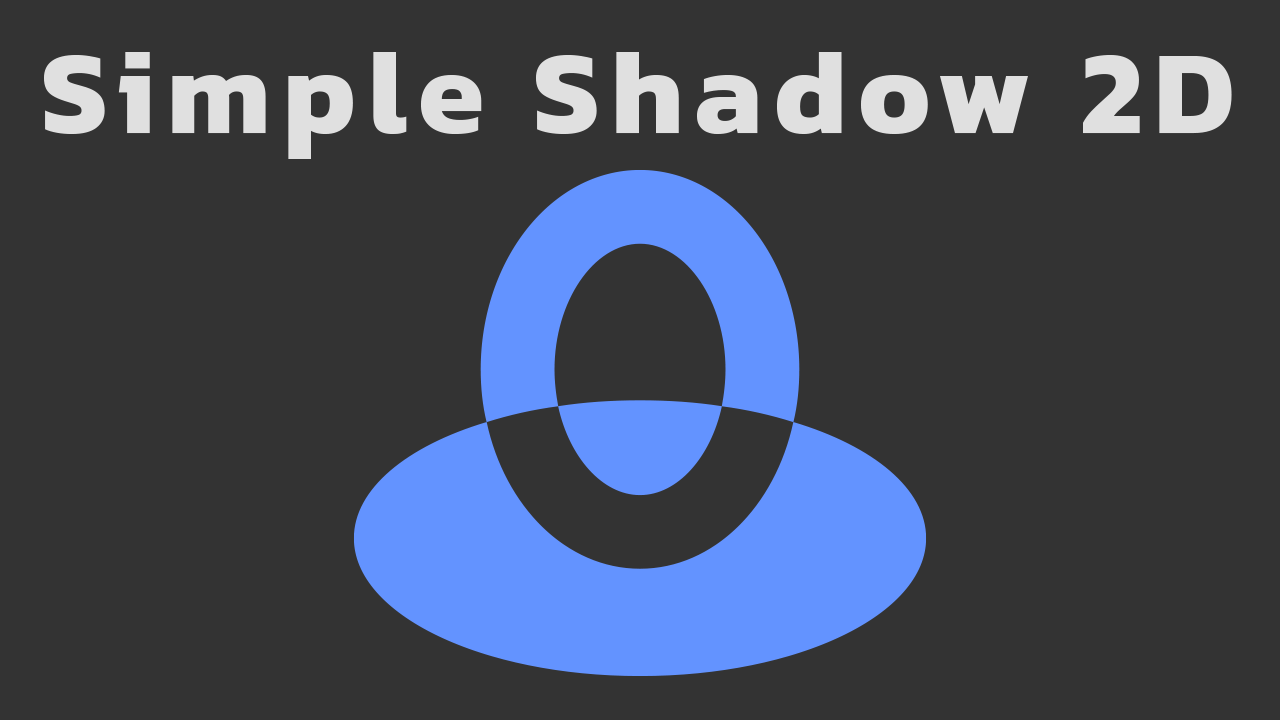
<style>
.page{position:relative;width:1280px;height:720px;background:#333333}
.page>*{position:absolute;margin:0}
.t1{font:120px "Kanit-Bold";letter-spacing:0.1em;color:#e0e0e0}
</style>
<div class="page">
<p class="t1" style="left:44px;top:52px;width:1188px;height:107px">Simple Shadow 2D</p>
</div>
